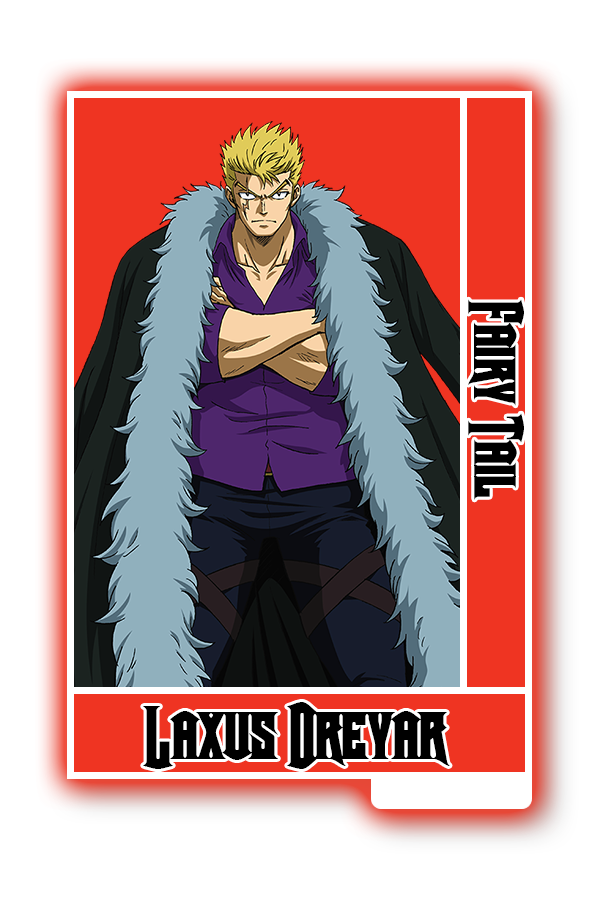
<style>
.page{position:relative;width:600px;height:900px;background:#ffffff}
.page>*{position:absolute;margin:0}
.t1{font:61.5px "Crown-Title";color:#000000}
.t2{font:70.1px "Crown-Title";color:#000000}
</style>
<div class="page">
<p class="t1" style="left:468px;top:299px;width:56px;height:201px;rotate:90deg">Fairy Tail</p>
<p class="t2" style="left:143px;top:702px;width:307px;height:67px">Laxus Dreyar</p>
</div>
